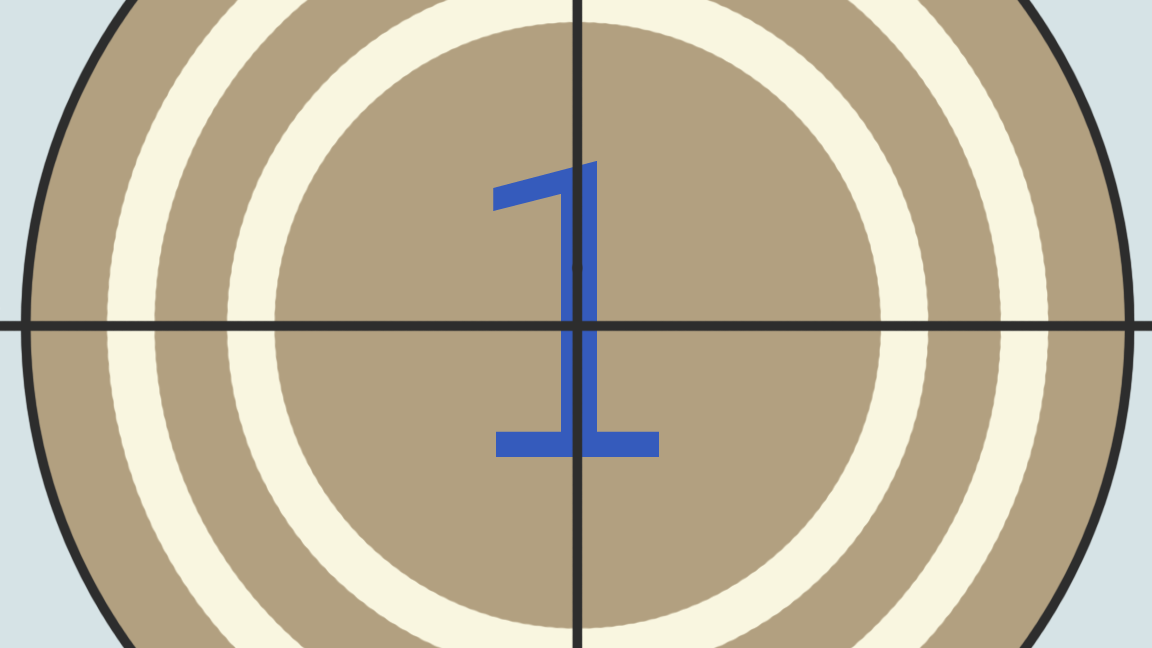
<style>
.page{position:relative;width:1152px;height:648px;background:#b2a080}
.page>*{position:absolute;margin:0}
.t1{font:400px "LetterGothicStd-Bold";letter-spacing:0.01em;color:#355bbc;scale:1.2 1}
</style>
<div class="page">
<p class="t1" style="left:493px;top:161px;width:166px;height:296px">1</p>
</div>
